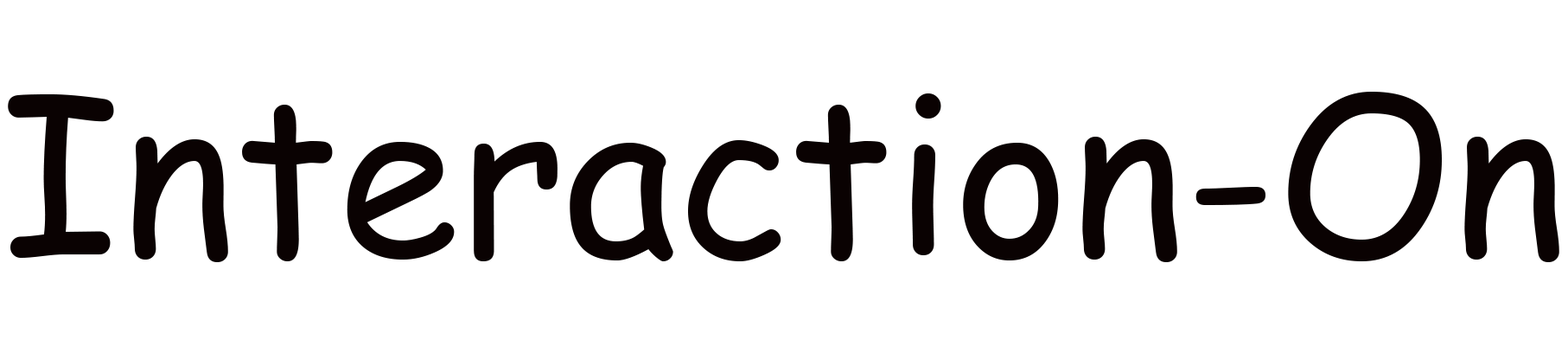
<style>
.page{position:relative;width:1568px;height:353px;background:#ffffff}
.page>*{position:absolute;margin:0}
.t1{font:219.5px "ComicSansMS";color:#0a0202}
</style>
<div class="page">
<p class="t1" style="left:8px;top:92px;width:1551px;height:170px">Interaction-On</p>
</div>
